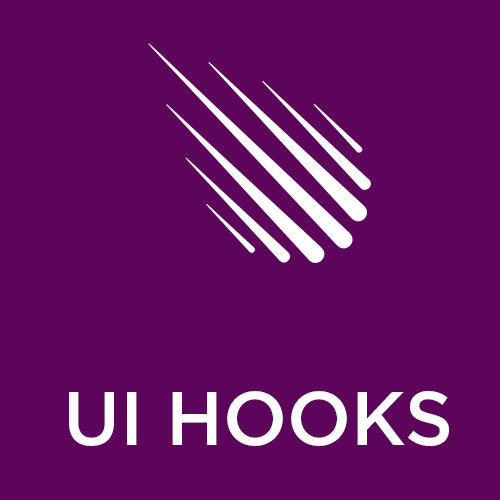
<style>
.page{position:relative;width:500px;height:500px;background:#5c055b}
.page>*{position:absolute;margin:0}
.t1{font:75.3px "GothamHTF-Medium";color:#ffffff}
</style>
<div class="page">
<p class="t1" style="left:69px;top:391px;width:380px;height:55px">UI HOOKS</p>
</div>
